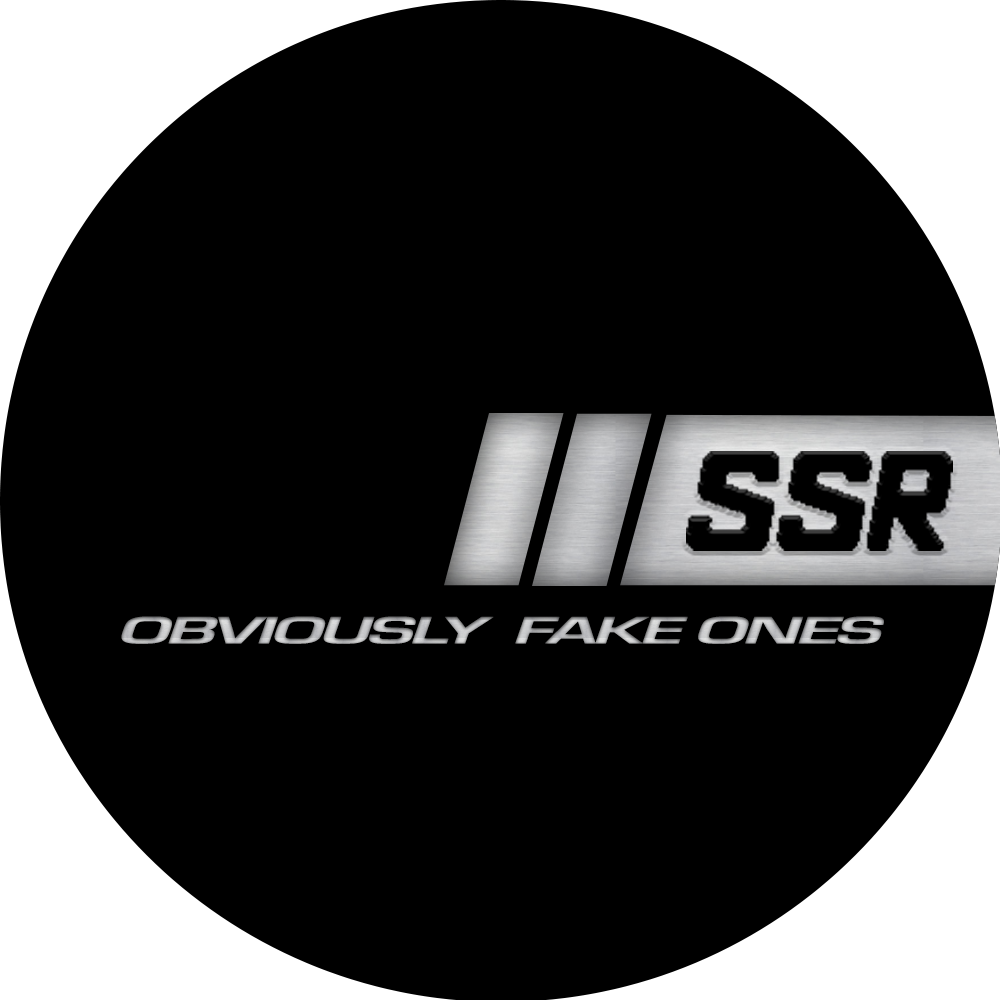
<style>
.page{position:relative;width:1000px;height:1000px;background:#000000}
.page>*{position:absolute;margin:0}
.t1{font:39.3px "Eurostile-Bol";letter-spacing:-0.08em;text-transform:uppercase;font-weight:bold;font-style:italic;scale:1.98 1}
</style>
<div class="page">
<p class="t1" style="left:121px;top:616px;width:763px;height:28px">obviously  fake ones</p>
</div>
